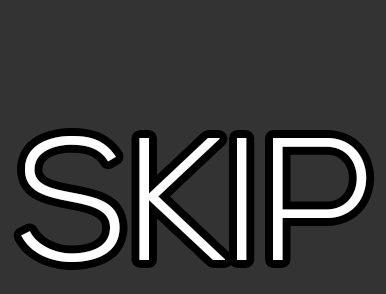
<style>
.page{position:relative;width:386px;height:294px;background:#333333}
.page>*{position:absolute;margin:0}
.t1{font:173.9px "NexaLight";color:#ffffff}
</style>
<div class="page">
<p class="t1" style="left:21px;top:136px;width:346px;height:126px">SKIP</p>
</div>
